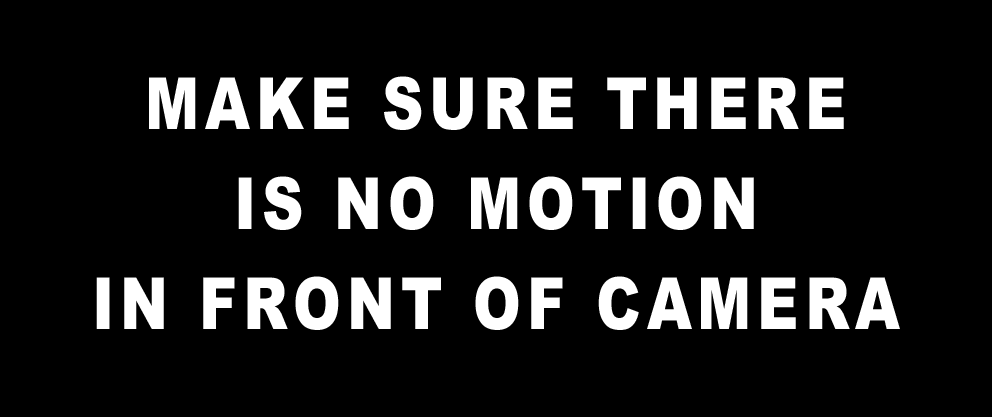
<style>
.page{position:relative;width:992px;height:417px;background:#000000}
.page>*{position:absolute;margin:0}
.t1{font:72px/100px "Arial-Black";letter-spacing:0.1em;color:#ffffff;scale:0.8 1}
</style>
<div class="page">
<p class="t1" style="left:96px;top:76px;width:804px;height:254px;text-align:center">MAKE SURE THERE<br>IS NO MOTION<br>IN FRONT OF CAMERA</p>
</div>
